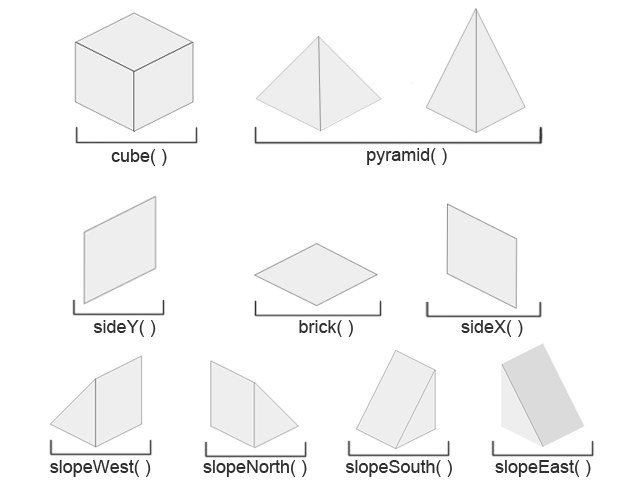
<style>
.page{position:relative;width:640px;height:480px;background:#ffffff}
.page>*{position:absolute;margin:0}
.t1{font:18px "ArialMT";color:#2d2d2d}
.t2{font:18px "ArialMT";color:#2f2f2f}
</style>
<div class="page">
<p class="t1" style="left:111px;top:149px;width:56px;height:17px">cube( )</p>
<p class="t2" style="left:367px;top:148px;width:80px;height:17px">pyramid( )</p>
<p class="t2" style="left:94px;top:320px;width:62px;height:17px">sideY( )</p>
<p class="t2" style="left:299px;top:320px;width:54px;height:17px">brick( )</p>
<p class="t2" style="left:461px;top:320px;width:62px;height:17px">sideX( )</p>
<p class="t2" style="left:50px;top:460px;width:101px;height:17px">slopeWest( )</p>
<p class="t2" style="left:203px;top:460px;width:104px;height:17px">slopeNorth( )</p>
<p class="t2" style="left:346px;top:460px;width:106px;height:17px">slopeSouth( )</p>
<p class="t2" style="left:495px;top:460px;width:96px;height:17px">slopeEast( )</p>
</div>
